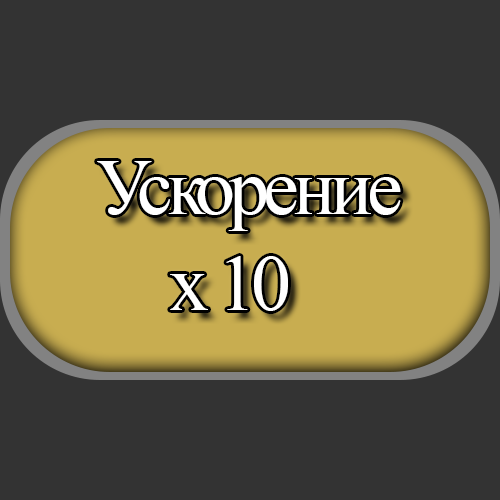
<style>
.page{position:relative;width:500px;height:500px;background:#333333}
.page>*{position:absolute;margin:0}
.t1{font:80px "TimesNewRomanPSMT";letter-spacing:-0.075em;color:#ffffff}
</style>
<div class="page">
<p class="t1" style="left:97px;top:161px;width:304px;height:150px">Ускорение <br>          х 10</p>
</div>
